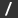
<style>
.page{position:relative;width:18px;height:18px;background:#333333}
.page>*{position:absolute;margin:0}
.t1{font:16px "KozGoPr6N-Regular";color:#ffffff;font-weight:bold}
</style>
<div class="page">
<p class="t1" style="left:5px;top:2px;width:7px;height:14px">/</p>
</div>
